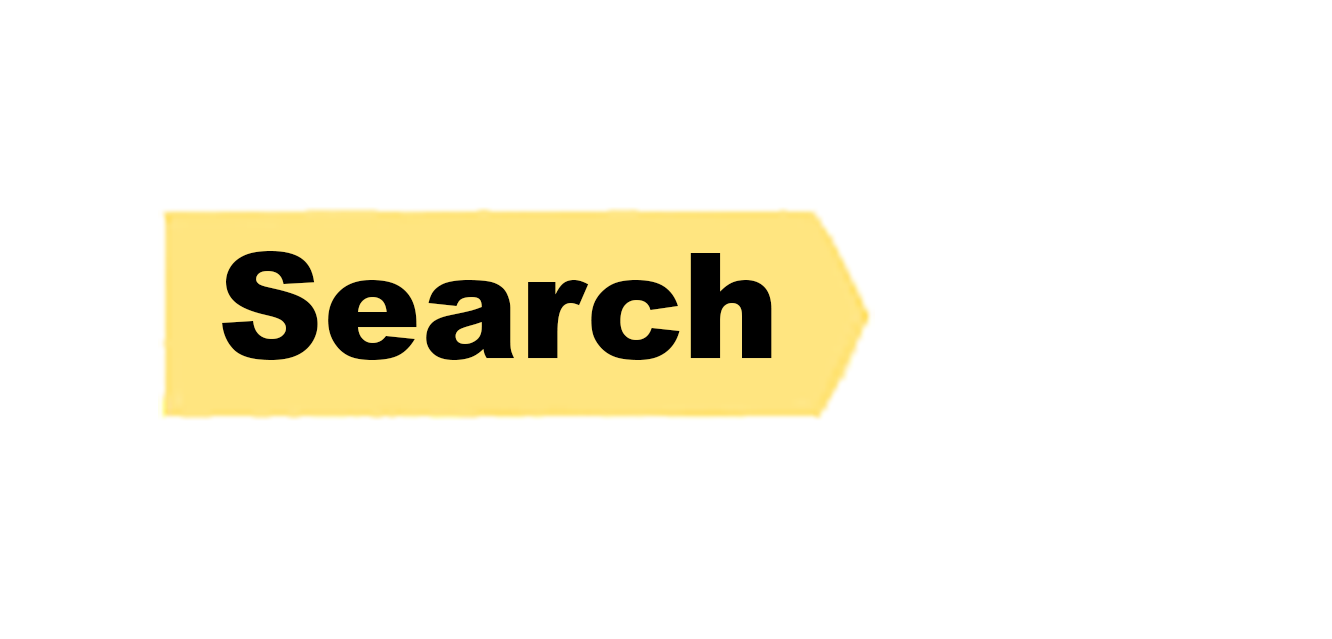
<style>
.page{position:relative;width:1332px;height:639px;background:#ffffff}
.page>*{position:absolute;margin:0}
.t1{font:146.7px "Arial-Black";color:#000000}
</style>
<div class="page">
<p class="t1" style="left:222px;top:251px;width:550px;height:109px">Search</p>
</div>
